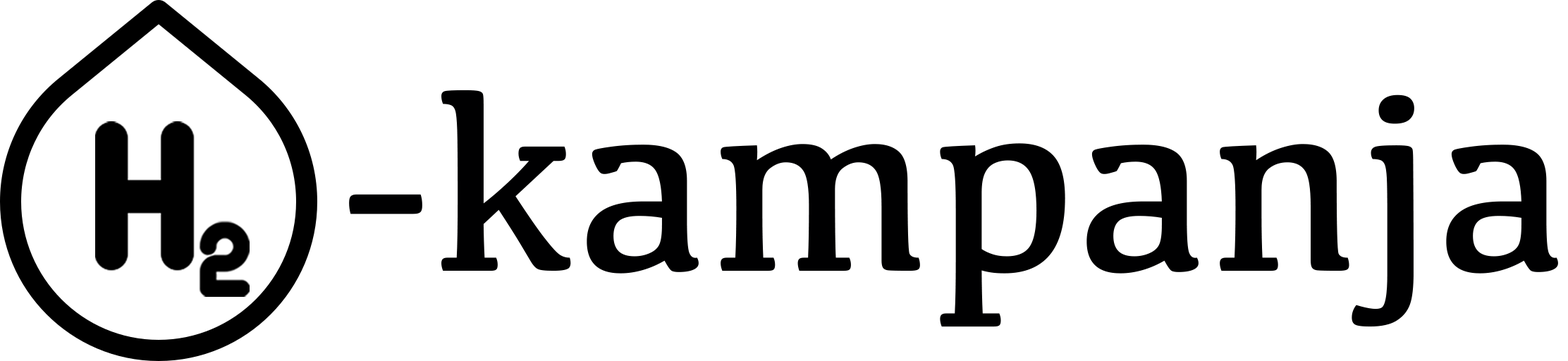
<style>
.page{position:relative;width:1568px;height:361px;background:#ffffff}
.page>*{position:absolute;margin:0}
.t1{font:259.3px "Kefa-Regular";color:#000001}
</style>
<div class="page">
<p class="t1" style="left:349px;top:90px;width:1209px;height:237px">-kampanja</p>
</div>
